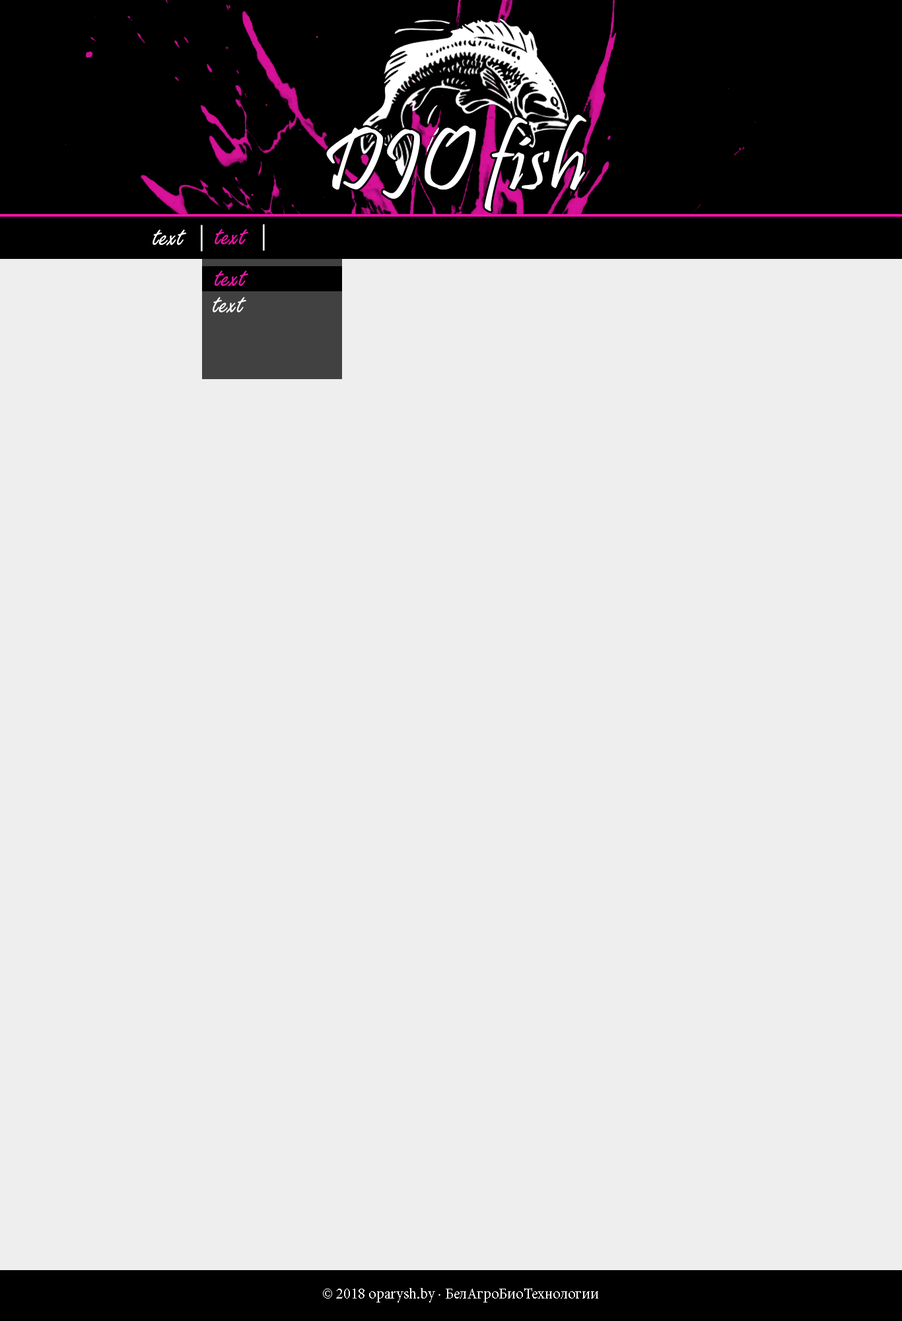
<style>
.page{position:relative;width:902px;height:1321px;background:#eeeeee}
.page>*{position:absolute;margin:0}
.t1{font:90.3px "Pristina-Regular";color:#ffffff}
.t2{font:31.3px "FreestyleScript-Regular";color:#ffffff}
.t3{font:31.3px "FreestyleScript-Regular";color:#ee13a9}
.t4{font:15.2px "MinionPro-Regular";color:#ffffff}
</style>
<div class="page">
<p class="t1" style="left:326px;top:114px;width:261px;height:97px">DJO fish</p>
<p class="t2" style="left:153px;top:225px;width:50px;height:27px">text |</p>
<p class="t3" style="left:215px;top:224px;width:50px;height:27px">text <span class="t2">|</span></p>
<p class="t3" style="left:215px;top:270px;width:33px;height:17px">text</p>
<p class="t2" style="left:213px;top:297px;width:33px;height:16px">text</p>
<p class="t4" style="left:323px;top:1288px;width:276px;height:15px">© 2018 oparysh.by · БелАгроБиоТехнологии</p>
</div>
